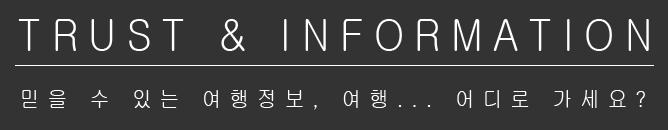
<style>
.page{position:relative;width:668px;height:130px;background:#333333}
.page>*{position:absolute;margin:0}
.t1{font:44.4px "Gulim";letter-spacing:0.27em;color:#ffffff;scale:0.88 1}
.t2{font:22.2px "Gulim";letter-spacing:0.41em;color:#ffffff;scale:0.88 1}
</style>
<div class="page">
<p class="t1" style="left:18px;top:19px;width:631px;height:32px">TRUST &amp; INFORMATION</p>
<p class="t2" style="left:22px;top:90px;width:623px;height:20px">믿을 수 있는 여행정보, 여행... 어디로 가세요?</p>
</div>
